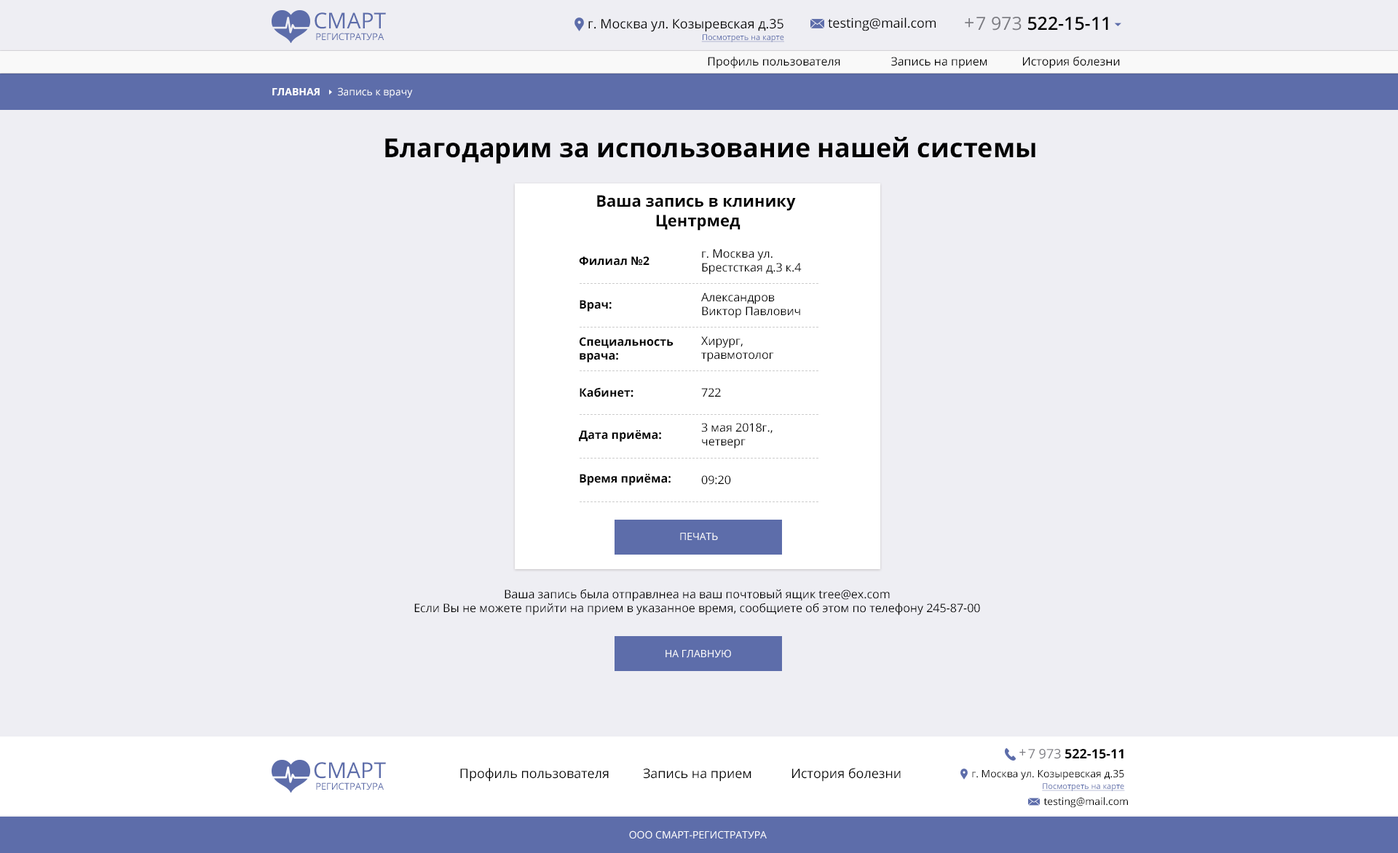
<style>
.page{position:relative;width:1398px;height:853px;background:#eeeef3}
.page>*{position:absolute;margin:0}
.t1{font:9.5px/11.6px "OpenSans";letter-spacing:-0.005em;color:#5d6daa}
.t2{font:21.8px/11.6px "OpenSans";color:#5d6daa}
.t3{font:13.1px "OpenSans";color:#000000}
.t4{font:18.2px "OpenSans-Semibold";color:#000000}
.t5{font:18.2px "OpenSans";color:#000000}
.t6{font:18.2px "OpenSans";color:#7b7b81}
.t7{font:13.1px/10.2px "OpenSans";color:#000000}
.t8{font:8px/11.6px "OpenSans";color:#5d6daa;text-decoration:underline}
.t9{font:11.6px "OpenSans";color:#000000}
.t10{font:10.2px "OpenSans";color:#ffffff}
.t11{font:10.2px "OpenSans-Bold";color:#ffffff}
.t12{font:26.3px "OpenSans-Bold";color:#000000}
.t13{font:16px "OpenSans-Bold";color:#000000}
.t14{font:11.6px "OpenSans-Bold";color:#000000}
.t15{font:10.2px "OpenSans";color:#ffffff;text-transform:uppercase}
.t16{font:13.1px "OpenSans";color:#7b7b81}
.t17{font:13.1px "OpenSans-Bold";color:#000000}
.t18{font:10.2px/10.2px "OpenSans";color:#000000}
.t19{font:10.2px "OpenSans";color:#000000}
</style>
<div class="page">
<p class="t1" style="left:314px;top:12px;width:72px;height:28px;text-align:center"><span class="t2">CМАРТ<br></span>РЕГИСТРАТУРА</p>
<p class="t3" style="left:828px;top:17px;width:107px;height:14px">testing@mail.com</p>
<p class="t4" style="left:976px;top:17px;width:132px;height:14px"><span class="t5">  </span><span class="t6">7 973 </span>522-15-11</p>
<p class="t7" style="left:588px;top:19px;width:196px;height:23px;text-align:right">г. Москва ул. Козыревская д.35<br><span class="t8">Посмотреть на карте</span></p>
<p class="t6" style="left:965px;top:18px;width:8px;height:10px">+</p>
<p class="t9" style="left:708px;top:56px;width:412px;height:12px">Профиль пользователя  Запись на прием  История болезни</p>
<p class="t10" style="left:272px;top:87px;width:141px;height:11px"><span class="t11">ГЛАВНАЯ      </span>Запись к врачу</p>
<p class="t12" style="left:385px;top:137px;width:650px;height:27px">Благодарим за использование нашей системы</p>
<p class="t13" style="left:597px;top:195px;width:199px;height:36px;text-align:center">Ваша запись в клинику <br>Центрмед</p>
<p class="t14" style="left:579px;top:256px;width:70px;height:10px">Филиал №2</p>
<p class="t9" style="left:702px;top:249px;width:99px;height:25px">г. Москва ул. <br>Брестсткая д.3 к.4</p>
<p class="t9" style="left:701px;top:293px;width:99px;height:25px">Александров<br>Виктор Павлович</p>
<p class="t14" style="left:579px;top:300px;width:32px;height:12px">Врач:</p>
<p class="t14" style="left:579px;top:337px;width:94px;height:26px">Специальность<br>врача:</p>
<p class="t9" style="left:701px;top:336px;width:73px;height:26px">Хирург,<br>травмотолог</p>
<p class="t14" style="left:579px;top:387px;width:54px;height:10px">Кабинет:</p>
<p class="t9" style="left:701px;top:388px;width:20px;height:9px">722</p>
<p class="t9" style="left:701px;top:423px;width:71px;height:25px">3 мая 2018г.,<br>четверг</p>
<p class="t14" style="left:579px;top:430px;width:82px;height:12px">Дата приёма:</p>
<p class="t14" style="left:579px;top:474px;width:91px;height:12px">Время приёма:</p>
<p class="t9" style="left:701px;top:475px;width:30px;height:10px">09:20</p>
<p class="t15" style="left:680px;top:533px;width:38px;height:7px">ПЕЧАТЬ</p>
<p class="t9" style="left:414px;top:589px;width:566px;height:26px;text-align:center">Ваша запись была отправлнеа на ваш почтовый ящик tree@ex.com<br>Если Вы не можете прийти на прием в указанное время, сообщиете об этом по телефону 245-87-00</p>
<p class="t15" style="left:665px;top:649px;width:66px;height:9px">НА ГЛАВНУЮ</p>
<p class="t16" style="left:1019px;top:749px;width:7px;height:7px">+</p>
<p class="t17" style="left:1028px;top:749px;width:95px;height:10px"><span class="t3">  </span><span class="t16">7 973 </span>522-15-11</p>
<p class="t1" style="left:314px;top:762px;width:72px;height:28px;text-align:center"><span class="t2">CМАРТ<br></span>РЕГИСТРАТУРА</p>
<p class="t3" style="left:460px;top:768px;width:440px;height:14px">Профиль пользователя  Запись на прием      История болезни</p>
<p class="t18" style="left:972px;top:769px;width:153px;height:22px;text-align:right">г. Москва ул. Козыревская д.35<br><span class="t8">Посмотреть на карте</span></p>
<p class="t19" style="left:1043px;top:797px;width:85px;height:11px">testing@mail.com</p>
<p class="t10" style="left:629px;top:831px;width:138px;height:8px">ООО СМАРТ-РЕГИСТРАТУРА</p>
</div>
